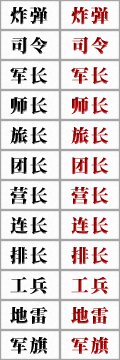
<style>
.page{position:relative;width:120px;height:360px}
.page>*{position:absolute;margin:0}
.t1{font:18px "¾­µäÌØËÎ¼ò Regular";letter-spacing:0.1em;color:#000000}
.t2{font:18px "¾­µäÌØËÎ¼ò Regular";letter-spacing:0.1em}
</style>
<div class="page">
<p class="t1" style="left:10px;top:7px;width:38px;height:18px">炸弹</p>
<p class="t2" style="left:71px;top:7px;width:38px;height:18px">炸弹</p>
<p class="t1" style="left:11px;top:36px;width:37px;height:19px">司令</p>
<p class="t2" style="left:72px;top:36px;width:37px;height:19px">司令</p>
<p class="t1" style="left:10px;top:67px;width:38px;height:18px">军长</p>
<p class="t2" style="left:71px;top:67px;width:38px;height:18px">军长</p>
<p class="t1" style="left:10px;top:96px;width:38px;height:19px">师长</p>
<p class="t2" style="left:71px;top:96px;width:38px;height:19px">师长</p>
<p class="t1" style="left:10px;top:127px;width:38px;height:18px">旅长</p>
<p class="t2" style="left:71px;top:127px;width:38px;height:18px">旅长</p>
<p class="t1" style="left:11px;top:157px;width:37px;height:18px">团长</p>
<p class="t2" style="left:72px;top:157px;width:37px;height:18px">团长</p>
<p class="t1" style="left:10px;top:186px;width:38px;height:19px">营长</p>
<p class="t2" style="left:71px;top:186px;width:38px;height:19px">营长</p>
<p class="t1" style="left:10px;top:217px;width:38px;height:18px">连长</p>
<p class="t2" style="left:71px;top:217px;width:38px;height:18px">连长</p>
<p class="t1" style="left:10px;top:247px;width:38px;height:18px">排长</p>
<p class="t2" style="left:71px;top:247px;width:38px;height:18px">排长</p>
<p class="t1" style="left:10px;top:277px;width:38px;height:18px">工兵</p>
<p class="t2" style="left:71px;top:277px;width:38px;height:18px">工兵</p>
<p class="t1" style="left:10px;top:307px;width:38px;height:17px">地雷</p>
<p class="t2" style="left:71px;top:307px;width:38px;height:17px">地雷</p>
<p class="t1" style="left:10px;top:337px;width:38px;height:17px">军旗</p>
<p class="t2" style="left:71px;top:337px;width:38px;height:17px">军旗</p>
</div>
